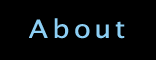
<style>
.page{position:relative;width:156px;height:60px;background:#000000}
.page>*{position:absolute;margin:0}
.t1{font:25px "LucidaSansUnicode";letter-spacing:0.26em;color:#8dcff4;scale:1.11 1}
</style>
<div class="page">
<p class="t1" style="left:29px;top:18px;width:96px;height:21px">About</p>
</div>
